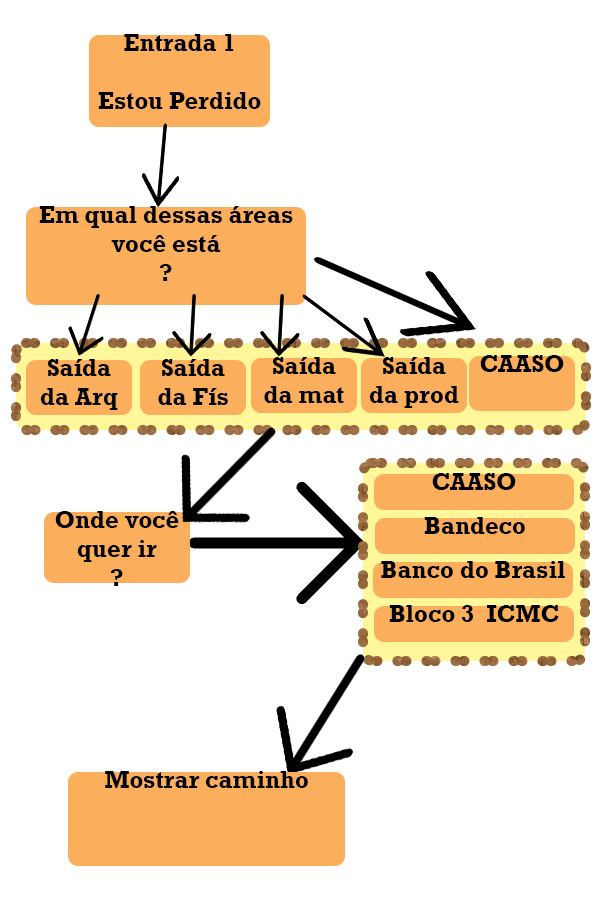
<style>
.page{position:relative;width:600px;height:900px;background:#ffffff}
.page>*{position:absolute;margin:0}
.t1{font:24px "Rockwell-Bold";color:#000000}
</style>
<div class="page">
<p class="t1" style="left:98px;top:34px;width:163px;height:75px;text-align:center">Entrada 1<br><br>Estou Perdido</p>
<p class="t1" style="left:39px;top:206px;width:254px;height:75px;text-align:center">Em qual dessas áreas você está <br>?<br>?</p>
<p class="t1" style="left:40px;top:359px;width:78px;height:51px;text-align:center">Saída da Arq</p>
<p class="t1" style="left:158px;top:359px;width:70px;height:46px;text-align:center">Saída da Fís</p>
<p class="t1" style="left:264px;top:357px;width:80px;height:46px;text-align:center">Saída da mat</p>
<p class="t1" style="left:369px;top:357px;width:90px;height:51px;text-align:center">Saída da prod</p>
<p class="t1" style="left:480px;top:355px;width:84px;height:17px">CAASO</p>
<p class="t1" style="left:432px;top:473px;width:84px;height:17px">CAASO</p>
<p class="t1" style="left:55px;top:511px;width:124px;height:75px;text-align:center">Onde você quer ir<br>?</p>
<p class="t1" style="left:424px;top:517px;width:101px;height:17px">Bandeco</p>
<p class="t1" style="left:381px;top:561px;width:184px;height:17px">Banco do Brasil</p>
<p class="t1" style="left:389px;top:605px;width:170px;height:17px">Bloco 3  ICMC</p>
<p class="t1" style="left:105px;top:771px;width:203px;height:17px">Mostrar caminho</p>
</div>
